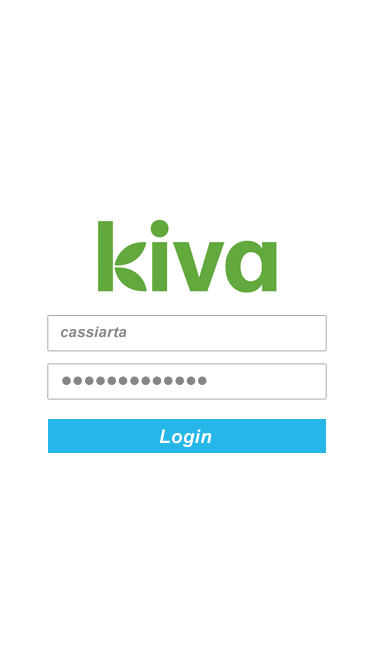
<style>
.page{position:relative;width:375px;height:667px;background:#ffffff}
.page>*{position:absolute;margin:0}
.t1{font:14.7px "Arial-BoldItalicMT";letter-spacing:0.025em;color:#868686}
.t2{font:18.7px "Arial-BoldItalicMT";letter-spacing:0.025em;color:#ffffff}
</style>
<div class="page">
<p class="t1" style="left:61px;top:326px;width:66px;height:12px">cassiarta</p>
<p class="t2" style="left:159px;top:429px;width:53px;height:18px">Login</p>
</div>
